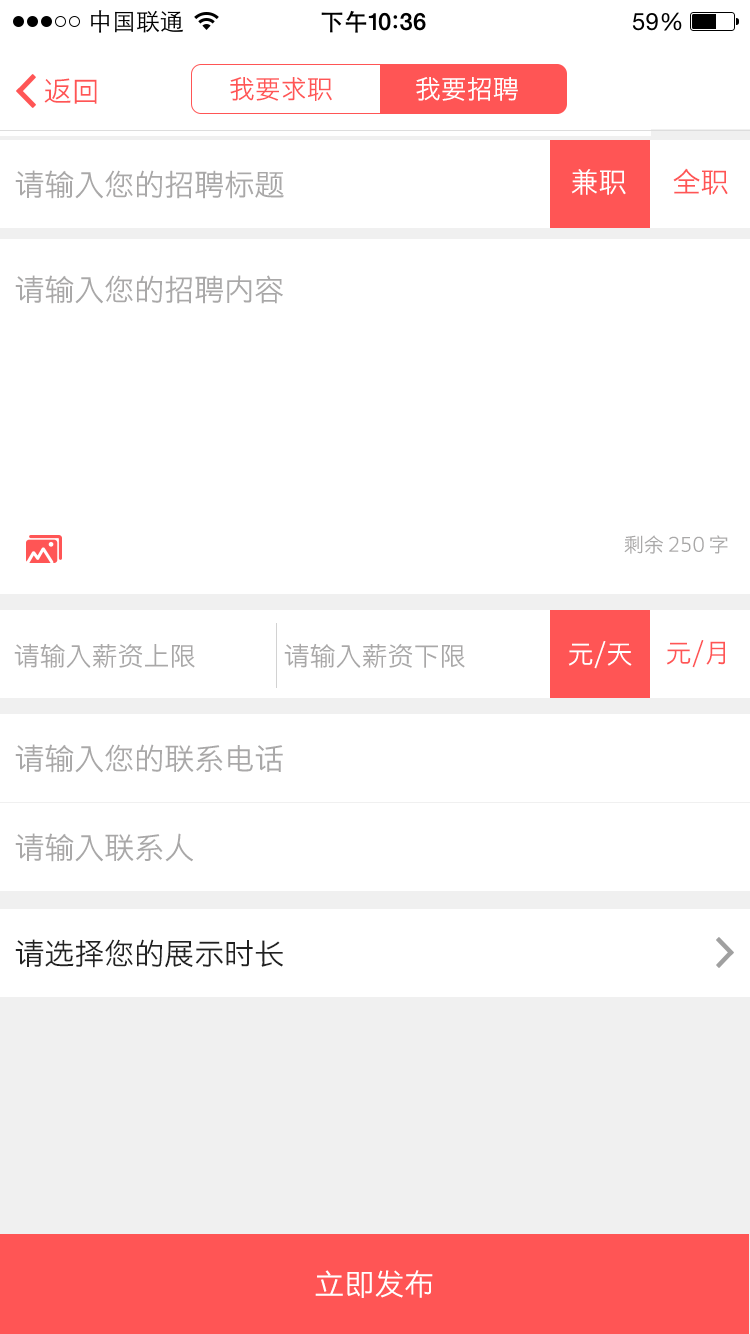
<style>
.page{position:relative;width:750px;height:1334px;background:#ffffff}
.page>*{position:absolute;margin:0}
.t1{font:28px "STHeitiSC-Light";color:#ff5555}
.t2{font:26px "STHeitiSC-Light";color:#ff5555}
.t3{font:26px "STHeitiSC-Light";color:#ffffff}
.t4{font:30px "STHeitiSC-Light";color:#a9a8a8}
.t5{font:28px "STHeitiSC-Light";color:#ffffff}
.t6{font:20px "STHeitiSC-Light";color:#a9a8a8}
.t7{font:26px "STHeitiSC-Light";color:#a9a8a8}
.t8{font:30px "STHeitiSC-Light";color:#222222}
.t9{font:30px "STHeitiSC-Light";color:#ffffff}
</style>
<div class="page">
<p class="t1" style="left:44px;top:78px;width:53px;height:26px">返回</p>
<p class="t2" style="left:230px;top:77px;width:102px;height:24px">我要求职</p>
<p class="t3" style="left:416px;top:77px;width:102px;height:24px">我要招聘</p>
<p class="t4" style="left:15px;top:170px;width:269px;height:29px">请输入您的招聘标题</p>
<p class="t5" style="left:571px;top:169px;width:55px;height:26px">兼职</p>
<p class="t1" style="left:673px;top:168px;width:55px;height:27px">全职</p>
<p class="t4" style="left:15px;top:275px;width:268px;height:29px">请输入您的招聘内容</p>
<p class="t6" style="left:624px;top:535px;width:104px;height:19px">剩余 250 字</p>
<p class="t3" style="left:568px;top:641px;width:64px;height:28px">元/天</p>
<p class="t2" style="left:666px;top:640px;width:59px;height:28px">元/月</p>
<p class="t7" style="left:14px;top:643px;width:181px;height:25px">请输入薪资上限</p>
<p class="t7" style="left:284px;top:643px;width:181px;height:25px">请输入薪资下限</p>
<p class="t4" style="left:15px;top:744px;width:268px;height:29px">请输入您的联系电话</p>
<p class="t4" style="left:15px;top:833px;width:178px;height:29px">请输入联系人</p>
<p class="t8" style="left:15px;top:939px;width:268px;height:29px"><span class="t4"> </span>请选择您的展示时长</p>
<p class="t9" style="left:315px;top:1270px;width:118px;height:28px">立即发布</p>
</div>
